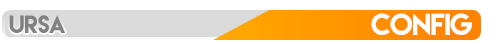
<style>
.page{position:relative;width:500px;height:44px;background:#ffffff}
.page>*{position:absolute;margin:0}
.t1{font:22.4px "LemonMilk";letter-spacing:-0.02em;color:#7b7b7b}
.t2{font:27.1px "LemonMilk";letter-spacing:-0.02em;color:#ffffff}
</style>
<div class="page">
<p class="t1" style="left:9px;top:15px;width:56px;height:18px">URSA</p>
<p class="t2" style="left:371px;top:13px;width:101px;height:23px">config</p>
</div>
